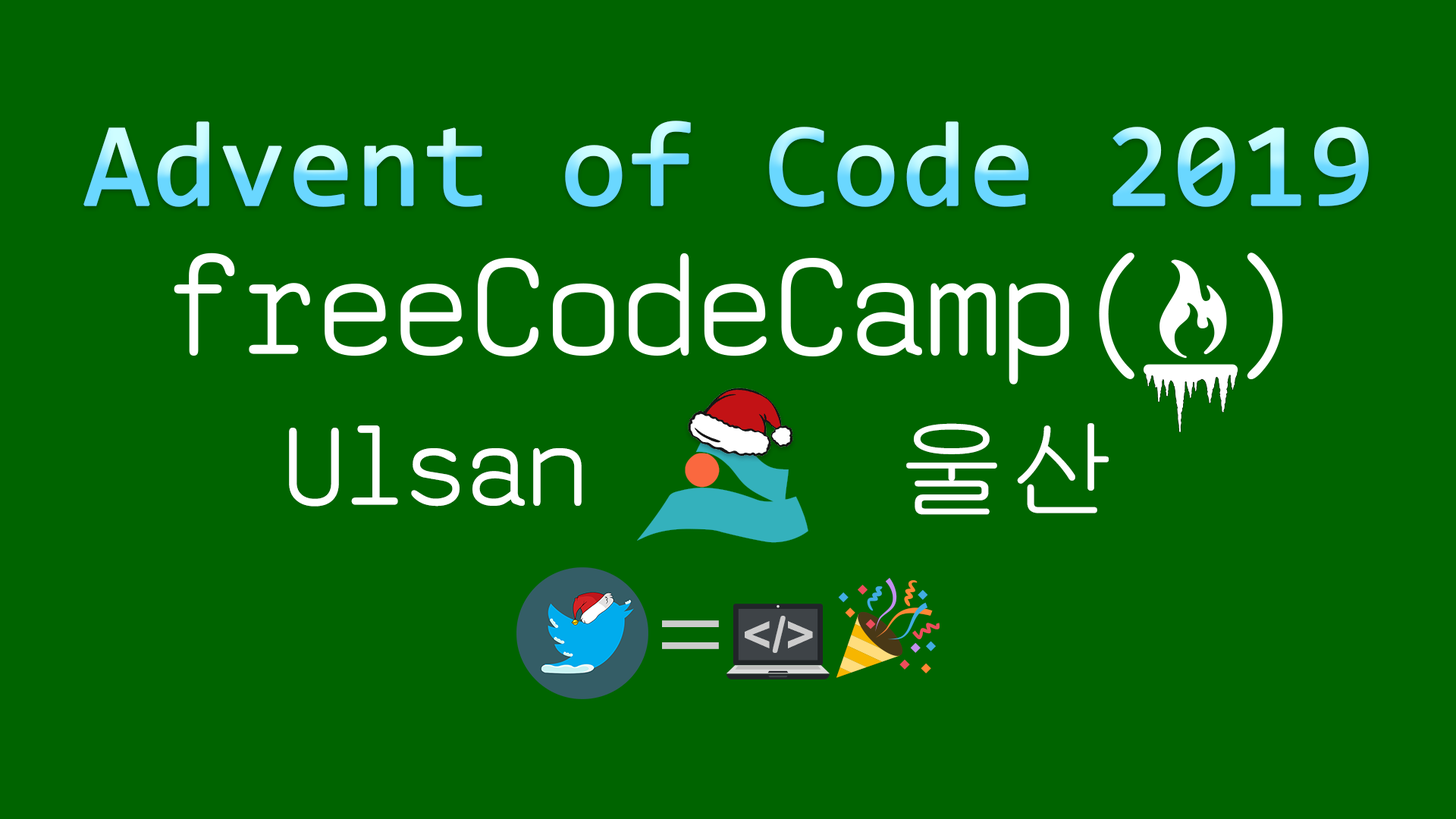
<style>
.page{position:relative;width:1456px;height:819px;background:#006400}
.page>*{position:absolute;margin:0}
.t1{font:118.1px "Consolas";font-weight:bold}
.t2{font:113px "saxMono";color:#ffffff}
.t3{font:113px "Gulim";color:#ffffff}
.t4{font:50.3px "ArialRoundedMTBold";color:#cccccc}
.t5{font:110px "MyriadPro-Regular";color:#cccccc}
</style>
<div class="page">
<p class="t1" style="left:83px;top:121px;width:1286px;height:86px">Advent of Code 2019</p>
<p class="t2" style="left:289px;top:425px;width:293px;height:82px">Ulsan</p>
<p class="t3" style="left:906px;top:423px;width:203px;height:92px">울산</p>
<p class="t4" style="left:745px;top:616px;width:68px;height:37px">&lt;/&gt;</p>
<p class="t5" style="left:662px;top:620px;width:57px;height:29px">=</p>
</div>
